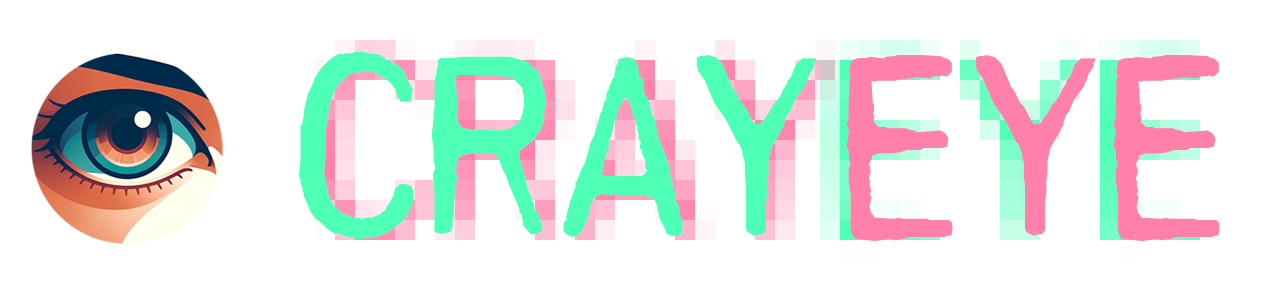
<style>
.page{position:relative;width:1279px;height:300px;background:#ffffff}
.page>*{position:absolute;margin:0}
.t1{font:259px "PRINTF-Regular";letter-spacing:-0.035em;color:#4effb6}
.t2{font:259px "PRINTF-Regular";letter-spacing:-0.035em;color:#ff80ab}
</style>
<div class="page">
<p class="t1" style="left:298px;top:52px;width:519px;height:187px">CRAY</p>
<p class="t2" style="left:846px;top:55px;width:374px;height:186px">EYE</p>
</div>
